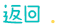
<style>
.page{position:relative;width:84px;height:27px;background:#ffffff}
.page>*{position:absolute;margin:0}
.t1{font:22px "BauhausITC";letter-spacing:-0.1em;color:#02c1bf}
</style>
<div class="page">
<p class="t1" style="left:3px;top:4px;width:37px;height:20px">返回</p>
</div>
